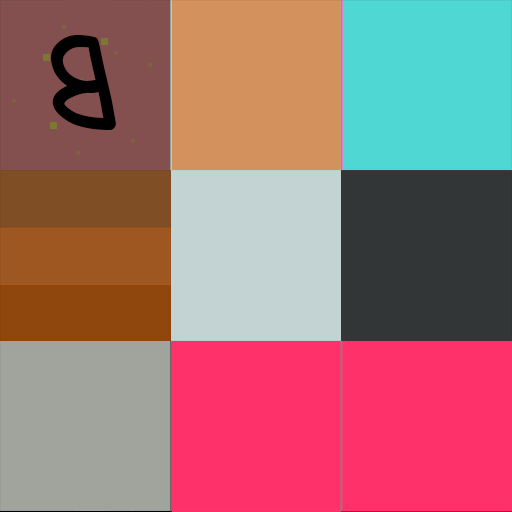
<style>
.page{position:relative;width:512px;height:512px;background:#ff316a}
.page>*{position:absolute;margin:0}
.t1{font:119.7px "ComicSansMS";color:#000000;font-style:italic}
</style>
<div class="page">
<p class="t1" style="left:50px;top:35px;width:66px;height:95px;rotate:-180deg">B</p>
</div>
